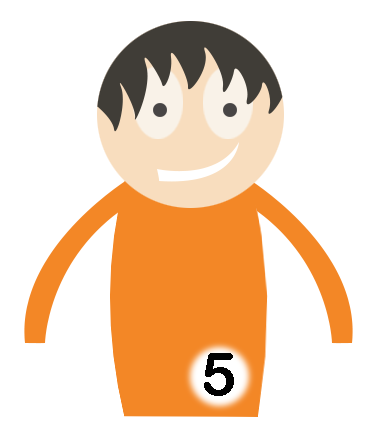
<style>
.page{position:relative;width:381px;height:444px;background:#ffffff}
.page>*{position:absolute;margin:0}
.t1{font:60px "ArialRoundedMTBold";letter-spacing:-0.05em;color:#010101}
</style>
<div class="page">
<p class="t1" style="left:204px;top:353px;width:30px;height:43px">5</p>
</div>
